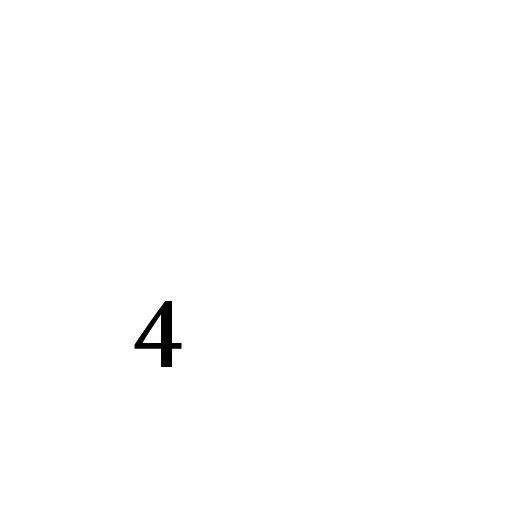
<style>
.page{position:relative;width:512px;height:512px;background:#ffffff}
.page>*{position:absolute;margin:0}
.t1{font:112px "AdobeGurmukhi-Bold";color:#000000}
</style>
<div class="page">
<p class="t1" style="left:134px;top:301px;width:48px;height:66px">4</p>
</div>
